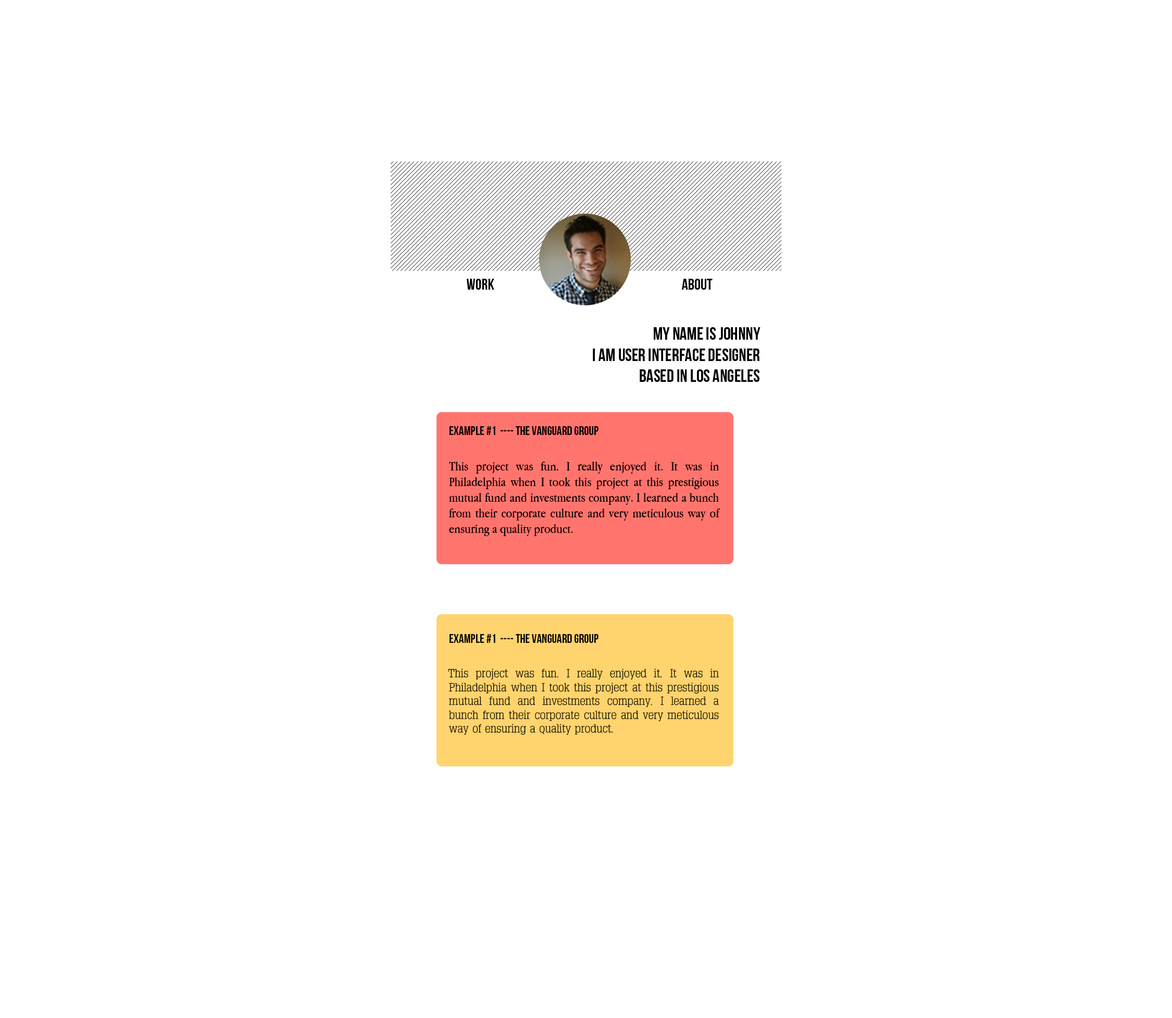
<style>
.page{position:relative;width:1172px;height:1018px;background:#ffffff}
.page>*{position:absolute;margin:0}
.t1{font:15.6px "BebasNeue";color:#000000}
.t2{font:17.7px "BebasNeue";color:#000000}
.t3{font:12.5px "BebasNeue";color:#000000}
.t4{font:13px "AppleGaramond";color:#000000}
.t5{font:11.5px "TypoSlabserif-Light";color:#000000}
</style>
<div class="page">
<p class="t1" style="left:467px;top:279px;width:27px;height:11px">Work</p>
<p class="t1" style="left:682px;top:279px;width:30px;height:11px">About</p>
<p class="t2" style="left:593px;top:327px;width:167px;height:55px;text-align:right">My name is Johnny<br>I am User Interface Designer based in Los Angeles</p>
<p class="t3" style="left:449px;top:426px;width:149px;height:9px">Example #1  ---- The vanguard group</p>
<p class="t4" style="left:449px;top:461px;width:271px;height:75px;text-align:justify">This project was fun. I really enjoyed it. It was in Philadelphia when I took this project at this prestigious mutual fund and investments company. I learned a bunch from their corporate culture and very meticulous way of ensuring a quality product.</p>
<p class="t3" style="left:449px;top:634px;width:149px;height:9px">Example #1  ---- The vanguard group</p>
<p class="t5" style="left:448px;top:668px;width:271px;height:67px;text-align:justify">This project was fun. I really enjoyed it. It was in Philadelphia when I took this project at this prestigious mutual fund and investments company. I learned a bunch from their corporate culture and very meticulous way of ensuring a quality product.</p>
</div>
